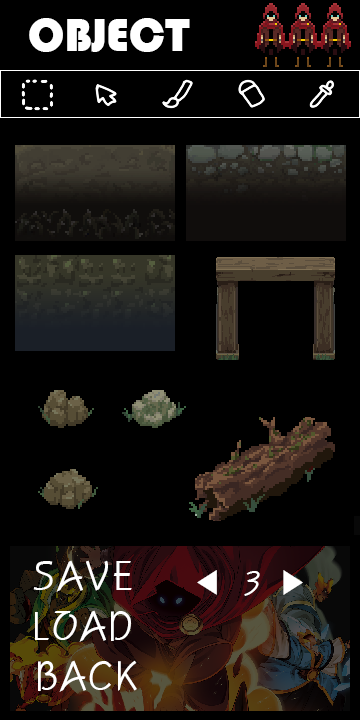
<style>
.page{position:relative;width:360px;height:720px;background:#000000}
.page>*{position:absolute;margin:0}
.t1{font:48px "Bauhaus93";color:#ffffff}
.t2{font:40px "H2porL";color:#ffffff}
.t3{font:32px "Gulim";color:#ffffff}
.t4{font:32px "PyunjiR-HM";color:#ffffff}
</style>
<div class="page">
<p class="t1" style="left:29px;top:18px;width:161px;height:34px">OBJECT</p>
<p class="t2" style="left:33px;top:560px;width:99px;height:32px">SAVE</p>
<p class="t3" style="left:197px;top:570px;width:106px;height:25px">◀     ▶</p>
<p class="t4" style="left:244px;top:571px;width:16px;height:25px">3</p>
<p class="t2" style="left:35px;top:610px;width:96px;height:32px">LOAD</p>
<p class="t2" style="left:38px;top:660px;width:99px;height:32px">BACK</p>
</div>
